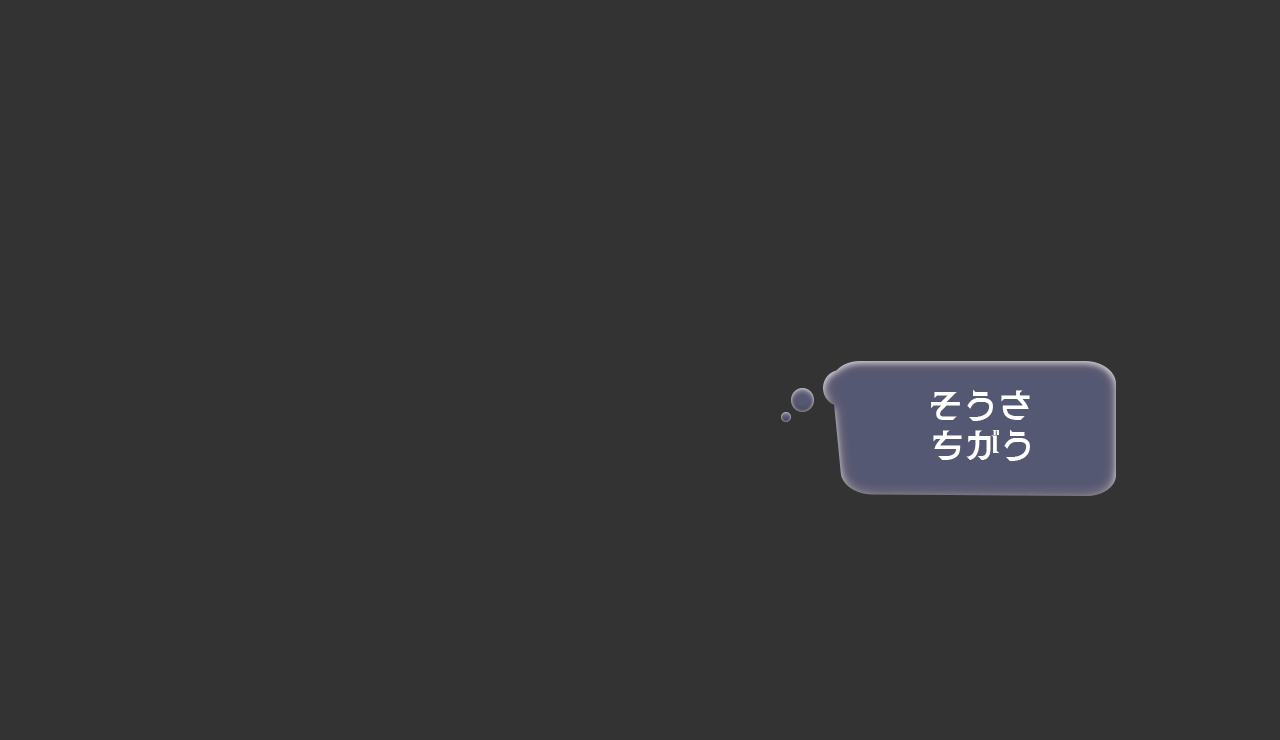
<style>
.page{position:relative;width:1280px;height:740px;background:#333333}
.page>*{position:absolute;margin:0}
.t1{font:35px "Kinkakuji-Normal";color:#ffffff}
</style>
<div class="page">
<p class="t1" style="left:931px;top:389px;width:99px;height:32px">そうさ</p>
<p class="t1" style="left:933px;top:429px;width:97px;height:32px">ちがう</p>
</div>
